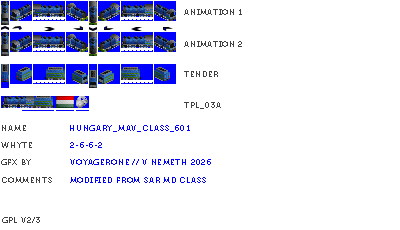
<style>
.page{position:relative;width:400px;height:230px;background:#ffffff}
.page>*{position:absolute;margin:0}
.t1{font:8px "Museo700-Regular";letter-spacing:0.075em;color:#404040;text-transform:uppercase}
.t2{font:8px "Museo700-Regular";letter-spacing:0.075em;color:#0000ff;text-transform:uppercase}
</style>
<div class="page">
<p class="t1" style="left:184px;top:9px;width:58px;height:6px">Animation 1</p>
<p class="t1" style="left:184px;top:41px;width:58px;height:6px">Animation 2</p>
<p class="t1" style="left:184px;top:71px;width:34px;height:6px">tender</p>
<p class="t1" style="left:184px;top:102px;width:37px;height:7px">tpl_03a</p>
<p class="t1" style="left:2px;top:125px;width:24px;height:6px">name</p>
<p class="t2" style="left:70px;top:125px;width:120px;height:7px">Hungary_MAV_Class_601</p>
<p class="t1" style="left:1px;top:142px;width:31px;height:6px">whyte</p>
<p class="t2" style="left:70px;top:142px;width:32px;height:6px">2-6-6-2</p>
<p class="t1" style="left:1px;top:159px;width:30px;height:6px">gfx by</p>
<p class="t2" style="left:70px;top:159px;width:141px;height:6px">voyagerone // v nemeth 2026</p>
<p class="t1" style="left:2px;top:177px;width:50px;height:6px">comments</p>
<p class="t2" style="left:70px;top:177px;width:136px;height:6px">modified from sar md class</p>
<p class="t1" style="left:2px;top:217px;width:38px;height:6px">gpl v2/3</p>
</div>
